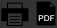
<style>
.page{position:relative;width:57px;height:28px;background:#333333}
.page>*{position:absolute;margin:0}
.t1{font:8px "HelveticaNeue-Medium";letter-spacing:0.025em}
</style>
<div class="page">
<p class="t1" style="left:38px;top:15px;width:17px;height:6px">PDF</p>
</div>
